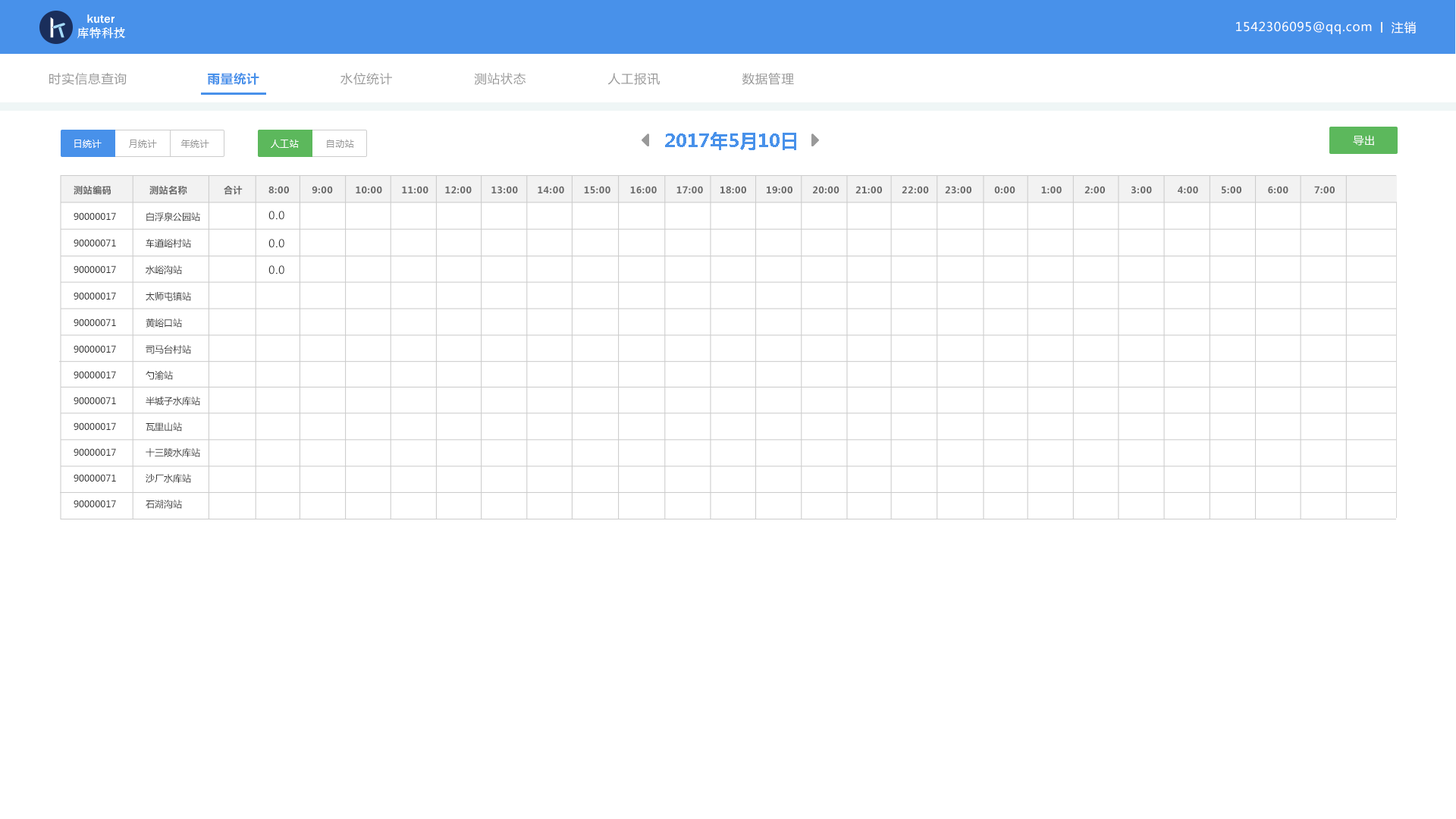
<style>
.page{position:relative;width:1456px;height:819px;background:#ffffff}
.page>*{position:absolute;margin:0}
.t1{font:12.1px "MicrosoftYaHei";letter-spacing:0.05em;color:#ffffff}
.t2{font:12.1px "MicrosoftYaHei";letter-spacing:0.05em;color:#999999}
.t3{font:12.1px "MicrosoftYaHei-Bold";letter-spacing:0.05em;color:#4891ea}
.t4{font:18.2px "MicrosoftYaHei-Bold";color:#4891ea}
.t5{font:10.6px "MicrosoftYaHei";letter-spacing:0.05em;color:#ffffff}
.t6{font:9.1px "MicrosoftYaHei";letter-spacing:0.05em;color:#ffffff}
.t7{font:9.1px "MicrosoftYaHei";letter-spacing:0.05em;color:#999999}
.t8{font:9.1px "MicrosoftYaHei-Bold";letter-spacing:0.05em;color:#696969}
.t9{font:9.1px/25.8px "MicrosoftYaHei";color:#333333}
.t10{font:9.1px/26.5px "MicrosoftYaHei";color:#333333}
.t11{font:10.6px "MicrosoftYaHei";letter-spacing:0.05em;color:#333333}
</style>
<div class="page">
<p class="t1" style="left:1236px;top:21px;width:136px;height:13px">1542306095@qq.com</p>
<p class="t1" style="left:1392px;top:21px;width:24px;height:12px">注销</p>
<p class="t2" style="left:49px;top:73px;width:78px;height:12px">时实信息查询</p>
<p class="t3" style="left:208px;top:73px;width:51px;height:12px">雨量统计</p>
<p class="t2" style="left:340px;top:73px;width:52px;height:12px">水位统计</p>
<p class="t2" style="left:474px;top:73px;width:52px;height:12px">测站状态</p>
<p class="t2" style="left:607px;top:73px;width:53px;height:12px">人工报讯</p>
<p class="t2" style="left:742px;top:73px;width:52px;height:12px">数据管理</p>
<p class="t4" style="left:665px;top:132px;width:131px;height:18px">2017年5月10日</p>
<p class="t5" style="left:1353px;top:135px;width:21px;height:11px">导出</p>
<p class="t6" style="left:74px;top:140px;width:28px;height:8px">日统计</p>
<p class="t7" style="left:129px;top:140px;width:28px;height:8px">月统计</p>
<p class="t7" style="left:180px;top:140px;width:29px;height:8px">年统计</p>
<p class="t6" style="left:271px;top:140px;width:28px;height:8px">人工站</p>
<p class="t7" style="left:327px;top:140px;width:27px;height:8px">自动站</p>
<p class="t8" style="left:74px;top:185px;width:37px;height:10px">测站编码</p>
<p class="t8" style="left:149px;top:186px;width:38px;height:9px">测站名称</p>
<p class="t8" style="left:224px;top:186px;width:19px;height:9px">合计</p>
<p class="t8" style="left:268px;top:186px;width:435px;height:7px">8:00       9:00       10:00      11:00     12:00      13:00      14:00      15:00      16:00      17:00</p>
<p class="t8" style="left:720px;top:186px;width:615px;height:7px">18:00      19:00      20:00     21:00      22:00     23:00       0:00        1:00       2:00        3:00        4:00       5:00        6:00        7:00</p>
<p class="t9" style="left:74px;top:212px;width:42px;height:295px"><span class="t10">90000017<br>90000071<br>90000017<br>90000017<br>90000071<br></span>90000017<br>90000017<br>90000071<br>90000017<br>90000017<br>90000071<br>90000017</p>
<p class="t9" style="left:146px;top:212px;width:54px;height:297px"><span class="t10">白浮泉公园站<br>车道峪村站<br>水峪沟站<br>太师屯镇站<br>黄峪口站<br></span>司马台村站<br>勺渝站<br>半城子水库站<br>瓦里山站<br>十三陵水库站<br>沙厂水库站<br>石湖沟站</p>
<p class="t11" style="left:268px;top:211px;width:16px;height:9px">0.0</p>
<p class="t11" style="left:268px;top:239px;width:16px;height:9px">0.0</p>
<p class="t11" style="left:268px;top:265px;width:16px;height:10px">0.0</p>
</div>
